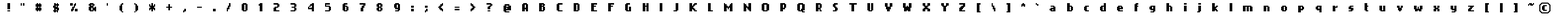
<style>
.page{position:relative;width:1568px;height:16px;background:#ffffff}
.page>*{position:absolute;margin:0}
.t1{font:9.6px "NokiaCellphoneFC-Small";letter-spacing:0.1em;color:#000000}
</style>
<div class="page">
<p class="t1" style="left:7px;top:3px;width:1527px;height:10px">!  "  #  $  %  &amp;  '  (  )  *  +  ,  -  .  /  0  1  2  3  4  5  6  7  8  9  :  ;  &lt;  =  &gt;  ?  @  A  B  C  D  E  F  G  H  I  J  K  L  M  N  O  P  Q  R  S  T  U  V  W  X  Y  Z  [  \  ]  ^  `  a  b  c  d  e  f  g  h  i  j  k  l  m  n  o  p  q  r  s  t  u  v  w  x  y  z  {  |  }  ~  ©</p>
<p class="t1" style="left:1542px;top:5px;width:5px;height:6px">c</p>
</div>
